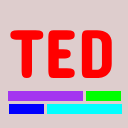
<style>
.page{position:relative;width:128px;height:128px;background:#decdcd}
.page>*{position:absolute;margin:0}
.t1{font:70px "Dangrek-Regular";color:#ff0000}
</style>
<div class="page">
<p class="t1" style="left:10px;top:30px;width:102px;height:48px">TED</p>
</div>
